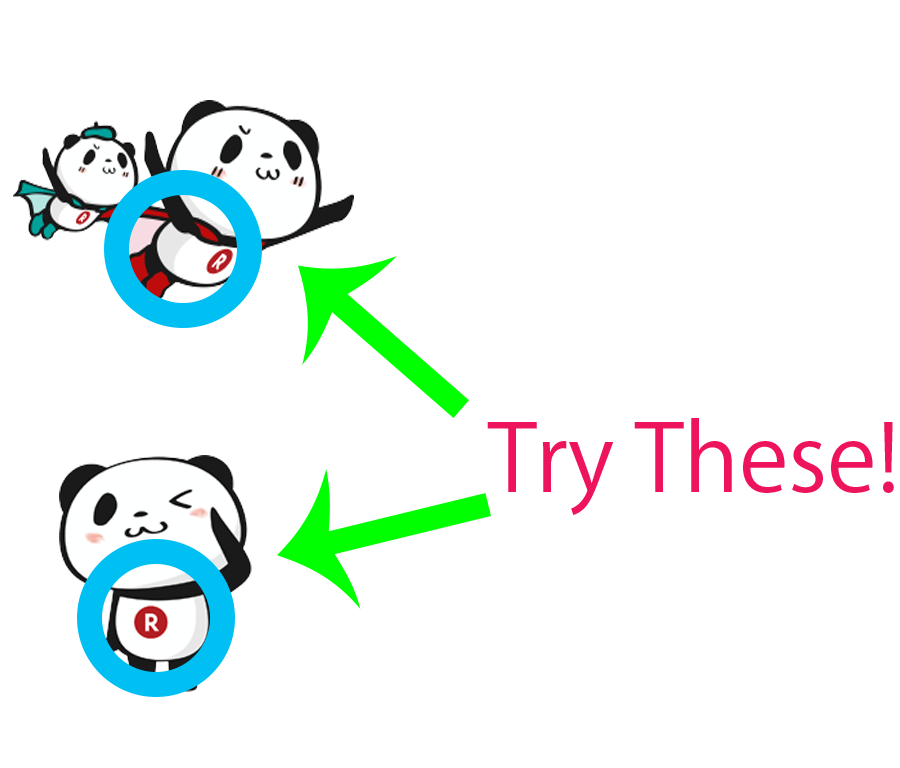
<style>
.page{position:relative;width:900px;height:768px;background:#ffffff}
.page>*{position:absolute;margin:0}
.t1{font:92px "KozGoPr6N-Regular";color:#ed145b}
</style>
<div class="page">
<p class="t1" style="left:487px;top:418px;width:407px;height:97px">Try These!</p>
</div>
